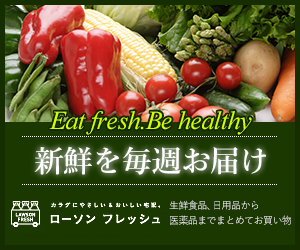
<style>
.page{position:relative;width:300px;height:250px;background:#1b3800}
.page>*{position:absolute;margin:0}
.t1{font:26px "TimesNewRomanPS-ItalicMT";letter-spacing:-0.02em;color:#d3fe00}
.t2{font:30px "YuMincho-Demibold";letter-spacing:-0.02em;color:#ffffff}
.t3{font:10px/13px "YuGothic-Regular";letter-spacing:-0.06em}
.t4{font:10px/15px "YuGothic-Regular";letter-spacing:-0.06em}
</style>
<div class="page">
<p class="t1" style="left:49px;top:111px;width:203px;height:24px">Eat fresh.Be healthy</p>
<p class="t2" style="left:34px;top:146px;width:232px;height:29px">新鮮を毎週お届け</p>
<p class="t3" style="left:169px;top:200px;width:122px;height:25px"><span class="t4">生</span>鮮食品、日用品から<br>医薬品までまとめてお買い物</p>
</div>
